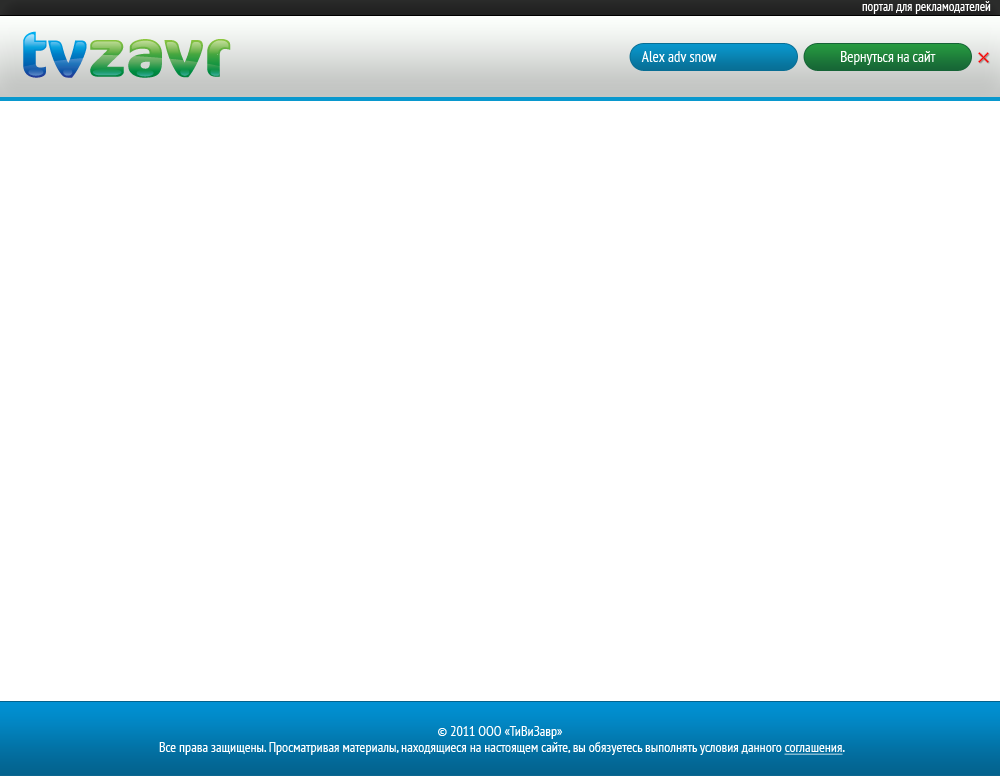
<style>
.page{position:relative;width:1000px;height:776px;background:#ffffff}
.page>*{position:absolute;margin:0}
.t1{font:13px "PTSans-Narrow";color:#ffffff}
.t2{font:15px "PTSans-Narrow";color:#ffffff}
.t3{font:15px "PTSans-Narrow";color:#fcfffc}
.t4{font:14px/16px "PTSans-Narrow";color:#ffffff}
.t5{font:14px/16px "PTSans-Narrow";color:#ffffff;text-decoration:underline}
</style>
<div class="page">
<p class="t1" style="left:862px;top:1px;width:129px;height:13px">портал для рекламодателей</p>
<p class="t2" style="left:641px;top:51px;width:76px;height:11px">Alex adv snow</p>
<p class="t3" style="left:841px;top:51px;width:95px;height:14px">Вернуться на сайт</p>
<p class="t4" style="left:159px;top:726px;width:686px;height:29px;text-align:center">© 2011 ООО «ТиВиЗавр»<br> Все права защищены. Просматривая материалы, находящиеся на настоящем сайте, вы обязуетесь выполнять условия данного <span class="t5">соглашения</span>.</p>
</div>
